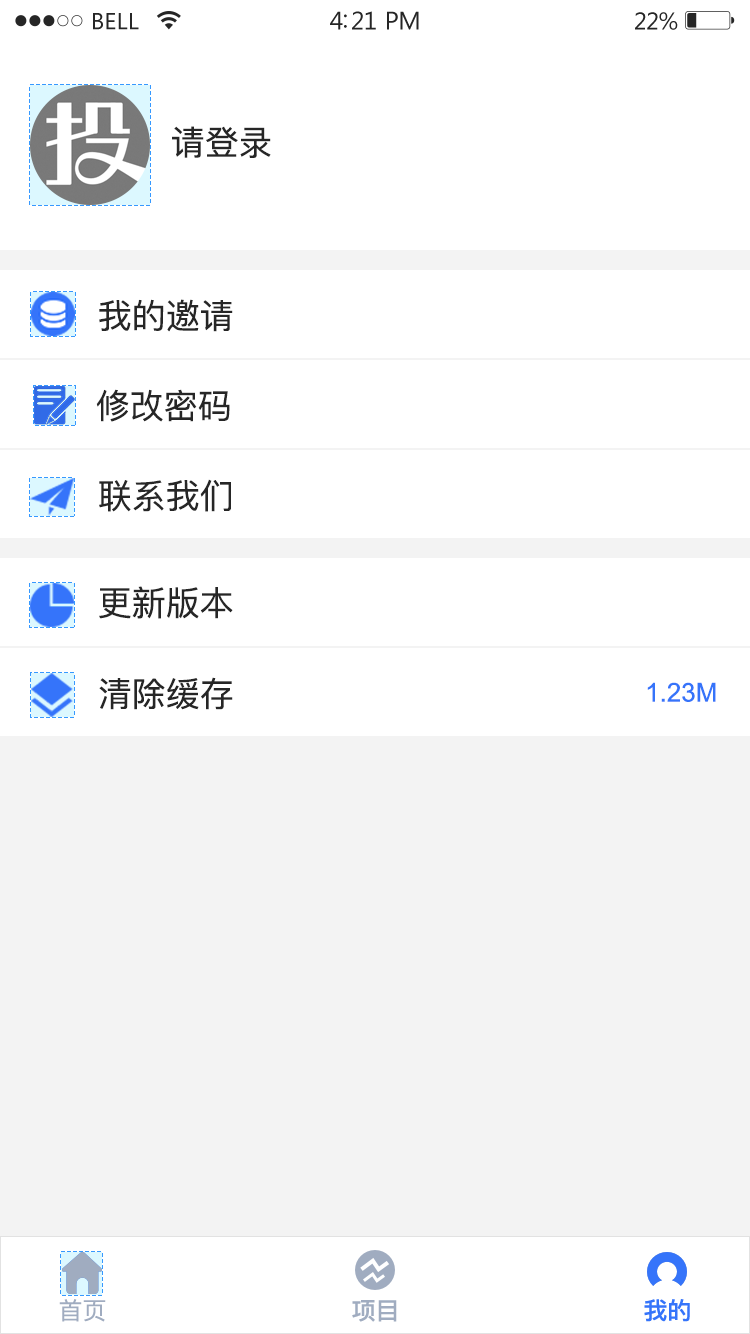
<style>
.page{position:relative;width:750px;height:1334px;background:#ffffff}
.page>*{position:absolute;margin:0}
.t1{font:34px "PingFangSC-Regular";color:#262626}
.t2{font:26px "ArialMT";color:#3574fa}
.t3{font:24px "PingFangSC-Regular";color:#a0acc0}
.t4{font:24px "PingFang-SC-Bold";color:#a0acc0}
.t5{font:24px "PingFang-SC-Bold";color:#3574fa}
</style>
<div class="page">
<p class="t1" style="left:172px;top:126px;width:99px;height:32px">请登录</p>
<p class="t1" style="left:99px;top:299px;width:134px;height:33px">我的邀请</p>
<p class="t1" style="left:96px;top:389px;width:134px;height:33px">修改密码</p>
<p class="t1" style="left:99px;top:479px;width:132px;height:33px">联系我们</p>
<p class="t1" style="left:99px;top:586px;width:134px;height:33px">更新版本</p>
<p class="t1" style="left:99px;top:677px;width:134px;height:33px">清除缓存</p>
<p class="t2" style="left:647px;top:682px;width:69px;height:20px">1.23M</p>
<p class="t3" style="left:59px;top:1299px;width:47px;height:23px">首页</p>
<p class="t4" style="left:352px;top:1300px;width:45px;height:22px">项目</p>
<p class="t5" style="left:644px;top:1299px;width:46px;height:23px">我的</p>
</div>
